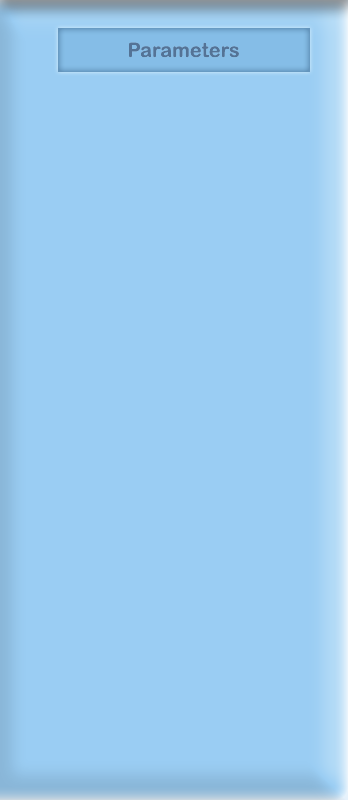
<style>
.page{position:relative;width:348px;height:800px;background:#9acdf3}
.page>*{position:absolute;margin:0}
.t1{font:20px "ArialRoundedMTBold";color:#547396}
</style>
<div class="page">
<p class="t1" style="left:129px;top:42px;width:110px;height:16px">Parameters</p>
</div>
